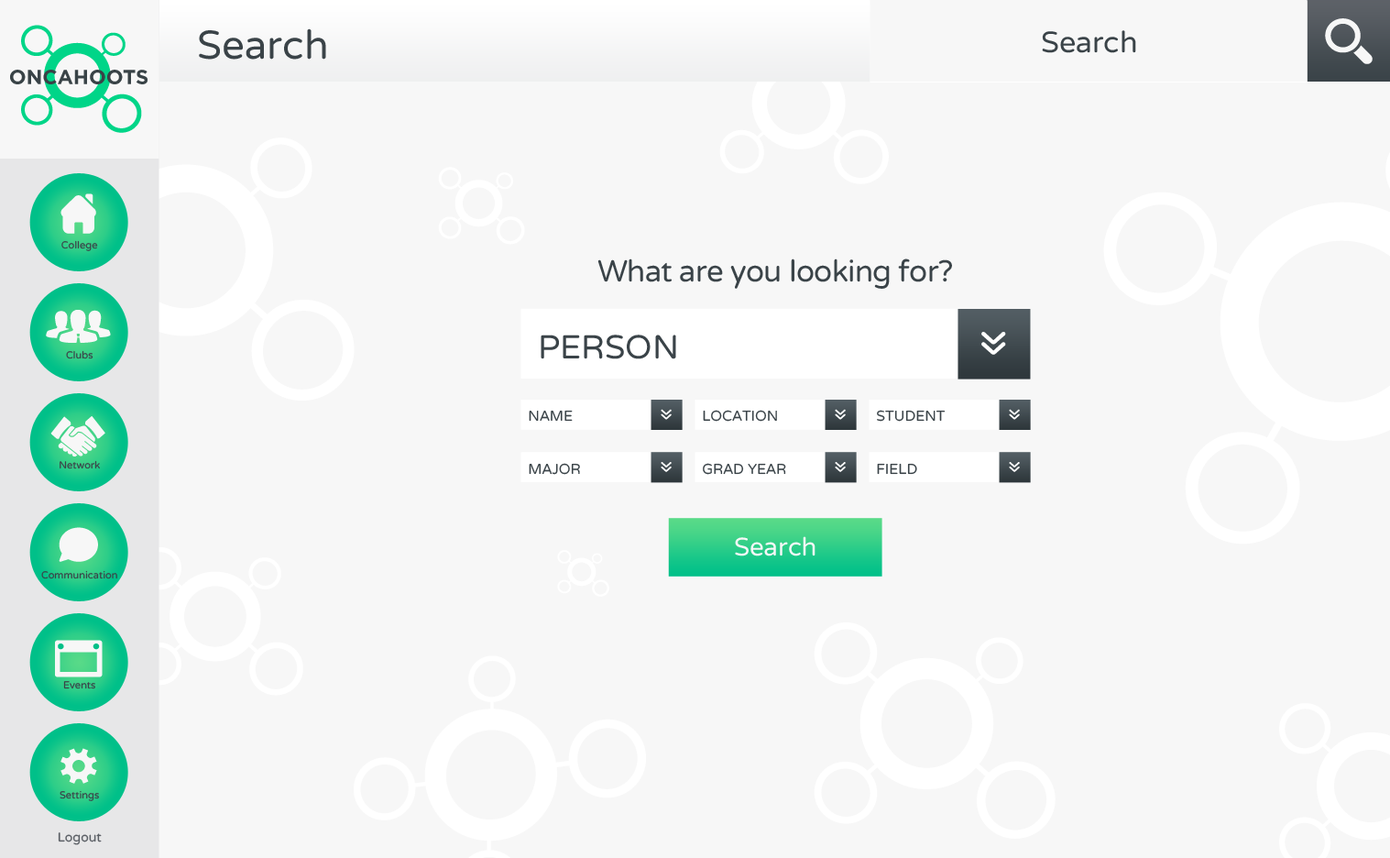
<style>
.page{position:relative;width:1390px;height:858px;background:#f7f7f7}
.page>*{position:absolute;margin:0}
.t1{font:40px "VarelaRound-Regular";color:#3a4348}
.t2{font:29.5px "VarelaRound-Regular";color:#3a4348}
.t3{font:10.1px "VarelaRound-Regular";color:#3a4348}
.t4{font:30.2px "VarelaRound-Regular";letter-spacing:-0.02em;color:#3a4348}
.t5{font:33.3px "VarelaRound-Regular";color:#3a4348;text-transform:uppercase}
.t6{font:14.4px "VarelaRound-Regular";color:#3a4348;text-transform:uppercase}
.t7{font:25.4px "VarelaRound-Regular";color:#f7f7f7}
.t8{font:12.8px "VarelaRound-Regular";color:#5c6066}
</style>
<div class="page">
<p class="t1" style="left:199px;top:28px;width:127px;height:32px">Search</p>
<p class="t2" style="left:1042px;top:30px;width:94px;height:23px">Search</p>
<p class="t3" style="left:61px;top:240px;width:37px;height:11px">College</p>
<p class="t4" style="left:597px;top:258px;width:355px;height:31px">What are you looking for?</p>
<p class="t5" style="left:541px;top:334px;width:135px;height:25px">Person</p>
<p class="t3" style="left:66px;top:350px;width:27px;height:9px">Clubs</p>
<p class="t6" style="left:529px;top:410px;width:44px;height:12px">Name</p>
<p class="t6" style="left:703px;top:410px;width:74px;height:12px">Location</p>
<p class="t6" style="left:877px;top:410px;width:69px;height:12px">Student</p>
<p class="t3" style="left:60px;top:460px;width:40px;height:9px">Network</p>
<p class="t6" style="left:529px;top:463px;width:51px;height:12px">Major</p>
<p class="t6" style="left:703px;top:463px;width:83px;height:12px">Grad Year</p>
<p class="t6" style="left:877px;top:463px;width:40px;height:12px">Field</p>
<p class="t7" style="left:735px;top:536px;width:81px;height:20px">Search</p>
<p class="t3" style="left:41px;top:570px;width:76px;height:9px">Communication</p>
<p class="t3" style="left:63px;top:681px;width:32px;height:8px">Events</p>
<p class="t3" style="left:60px;top:791px;width:39px;height:10px">Settings</p>
<p class="t8" style="left:58px;top:832px;width:44px;height:13px">Logout</p>
</div>
